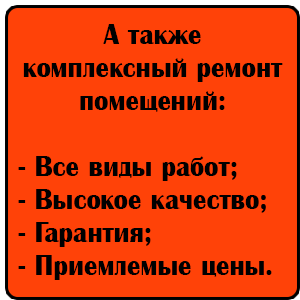
<style>
.page{position:relative;width:300px;height:300px;background:#ff4208}
.page>*{position:absolute;margin:0}
.t1{font:27.5px "AAlbionicBold";color:#000000}
</style>
<div class="page">
<p class="t1" style="left:18px;top:24px;width:265px;height:256px;text-align:center">А также комплексный ремонт помещений:<br><br>- Все виды работ;<br>- Высокое качество;<br>- Гарантия;<br>- Приемлемые цены.<br>- Комплексный ремонт помещений.</p>
</div>
